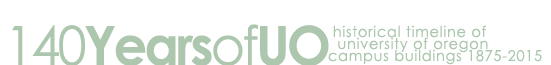
<style>
.page{position:relative;width:551px;height:65px;background:#ffffff}
.page>*{position:absolute;margin:0}
.t1{font:54px "CenturyGothic-Bold";letter-spacing:-0.05em;color:#adc7ae;scale:0.97 1}
.t2{font:54px "CenturyGothic";letter-spacing:-0.05em;color:#adc7ae;scale:0.97 1}
.t3{font:15px/12px "CenturyGothic";letter-spacing:0.05em;color:#adc7ae;scale:0.97 1}
</style>
<div class="page">
<p class="t1" style="left:12px;top:24px;width:317px;height:41px"><span class="t2">140</span>Years<span class="t2">of</span>UO</p>
<p class="t3" style="left:328px;top:25px;width:214px;height:40px">historical timeline of <br>  university of oregon <br>campus buildings 1875-2015</p>
</div>
